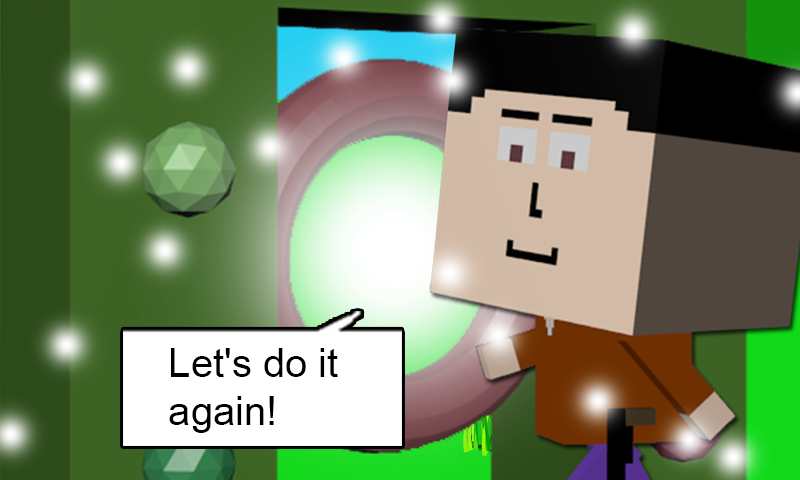
<style>
.page{position:relative;width:800px;height:480px}
.page>*{position:absolute;margin:0}
.t1{font:40px "ArialMT";color:#000000}
</style>
<div class="page">
<p class="t1" style="left:169px;top:348px;width:169px;height:85px">Let's do it<br>again!</p>
</div>
